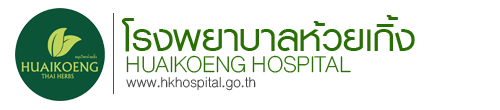
<style>
.page{position:relative;width:500px;height:110px;background:#ffffff}
.page>*{position:absolute;margin:0}
.t1{font:54px "PSLKittithadaSP";letter-spacing:0.005em;color:#287004}
.t2{font:32px "DBHelvethaicaX-Thin";letter-spacing:-0.01em;color:#287004}
.t3{font:20px "DBHelvethaicaX-Thin";color:#494949}
</style>
<div class="page">
<p class="t1" style="left:121px;top:15px;width:294px;height:37px">โรงพยาบาลห้วยเกิ้ง</p>
<p class="t2" style="left:126px;top:55px;width:225px;height:18px">HUAIKOENG HOSPITAL</p>
<p class="t3" style="left:126px;top:77px;width:130px;height:14px">www.hkhospital.go.th</p>
</div>
